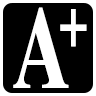
<style>
.page{position:relative;width:96px;height:96px;background:#000000}
.page>*{position:absolute;margin:0}
.t1{font:117px "RomanticBold";color:#ffffff;font-weight:bold;scale:0.69 1}
.t2{font:78px "RomanticBold";color:#ffffff;font-weight:bold;scale:0.69 1}
</style>
<div class="page">
<p class="t1" style="left:13px;top:7px;width:56px;height:81px">A</p>
<p class="t2" style="left:60px;top:9px;width:27px;height:38px">+</p>
</div>
